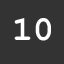
<style>
.page{position:relative;width:64px;height:64px;background:#333333}
.page>*{position:absolute;margin:0}
.t1{font:35px "CourierNewPS-BoldMT";color:#ffffff}
</style>
<div class="page">
<p class="t1" style="left:14px;top:18px;width:37px;height:23px">10</p>
</div>
